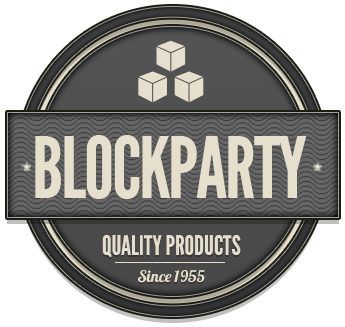
<style>
.page{position:relative;width:345px;height:327px;background:#ffffff}
.page>*{position:absolute;margin:0}
.t1{font:84.5px "LeagueGothic-Regular";letter-spacing:-0.025em;color:#e6dfcd}
.t2{font:26.7px/26.7px "LeagueGothic-Regular";color:#e6dfcd}
.t3{font:16px/26.7px "Lobster1.4";color:#e6dfcd}
</style>
<div class="page">
<p class="t1" style="left:35px;top:135px;width:272px;height:64px">BLOCKPARTY</p>
<p class="t2" style="left:102px;top:235px;width:139px;height:48px;text-align:center">QUALITY PRODUCTS<br><span class="t3">Since 1955</span></p>
</div>
